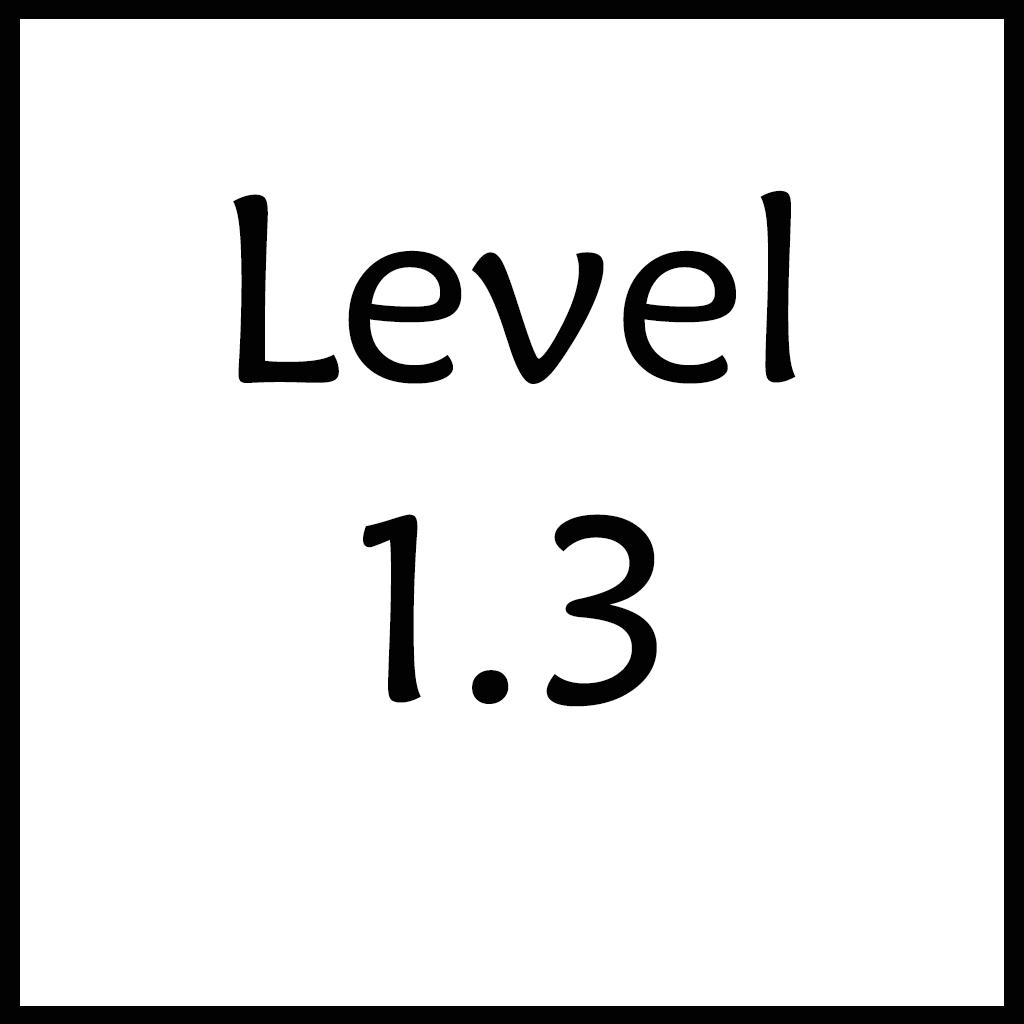
<style>
.page{position:relative;width:1024px;height:1024px;background:#ffffff}
.page>*{position:absolute;margin:0}
.t1{font:266.7px "MaiandraGD-Regular";color:#020202}
</style>
<div class="page">
<p class="t1" style="left:233px;top:190px;width:563px;height:517px;text-align:center">Level <br>1.3</p>
</div>
